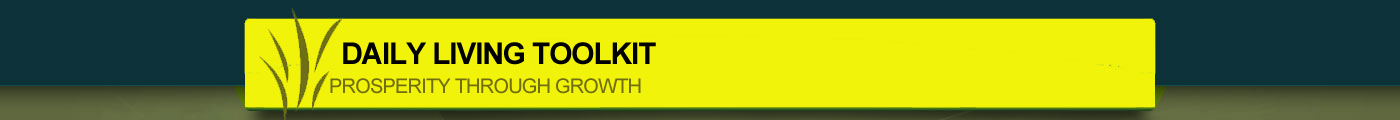
<style>
.page{position:relative;width:1400px;height:120px;background:#f1f30a}
.page>*{position:absolute;margin:0}
.t1{font:30px "Arial-BoldMT";letter-spacing:-0.04em;color:#000100}
.t2{font:20px "ArialMT";letter-spacing:-0.04em;color:#716e11}
</style>
<div class="page">
<p class="t1" style="left:343px;top:42px;width:313px;height:23px">DAILY LIVING TOOLKIT</p>
<p class="t2" style="left:330px;top:78px;width:311px;height:16px">PROSPERITY THROUGH GROWTH</p>
</div>
